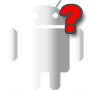
<style>
.page{position:relative;width:90px;height:90px;background:#ffffff}
.page>*{position:absolute;margin:0}
.t1{font:36px "Arial-Black";color:#ff0000}
</style>
<div class="page">
<p class="t1" style="left:61px;top:5px;width:20px;height:27px">?</p>
</div>
